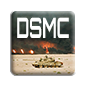
<style>
.page{position:relative;width:86px;height:86px;background:#ffffff}
.page>*{position:absolute;margin:0}
.t1{font:28px "Orbitron-Bold";color:#ffffff;scale:0.56 1}
</style>
<div class="page">
<p class="t1" style="left:17px;top:17px;width:52px;height:21px">DSMC</p>
</div>
